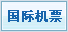
<style>
.page{position:relative;width:68px;height:32px;background:#f0f7ff}
.page>*{position:absolute;margin:0}
.t1{font:13.3px "SimSun";color:#1664ac;font-weight:bold}
</style>
<div class="page">
<p class="t1" style="left:8px;top:10px;width:54px;height:12px">国际机票</p>
</div>
